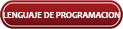
<style>
.page{position:relative;width:123px;height:29px}
.page>*{position:absolute;margin:0}
.t1{font:9.8px "Candara-Bold";color:#ffffff;font-variant:small-caps;scale:0.88 1}
</style>
<div class="page">
<p class="t1" style="left:3px;top:12px;width:117px;height:6px">LENGUAJE DE PROGRAMACION</p>
</div>
